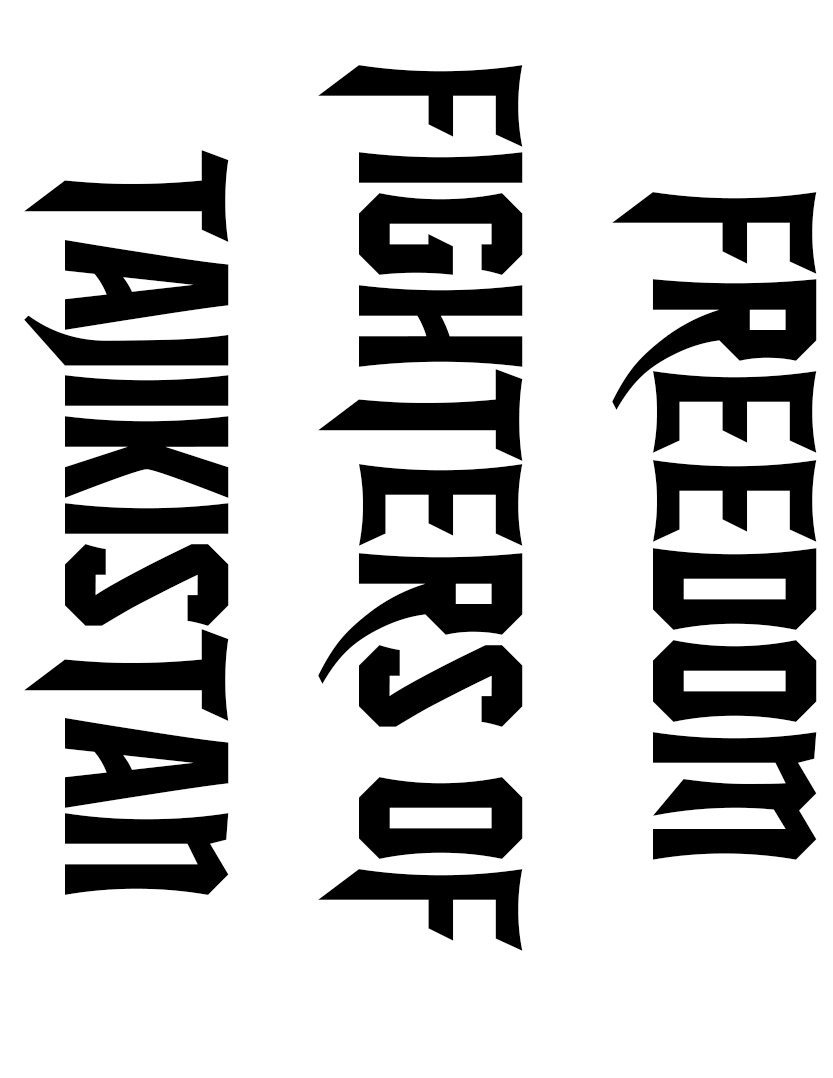
<style>
.page{position:relative;width:833px;height:1078px;background:#ffffff}
.page>*{position:absolute;margin:0}
.t1{font:245px "SFIronsides";color:#000000}
</style>
<div class="page">
<p class="t1" style="left:24px;top:65px;width:793px;height:886px;text-align:center;rotate:90deg">FREEDOM<br>FIGHTERS OF <br>TAJIKISTAN</p>
</div>
